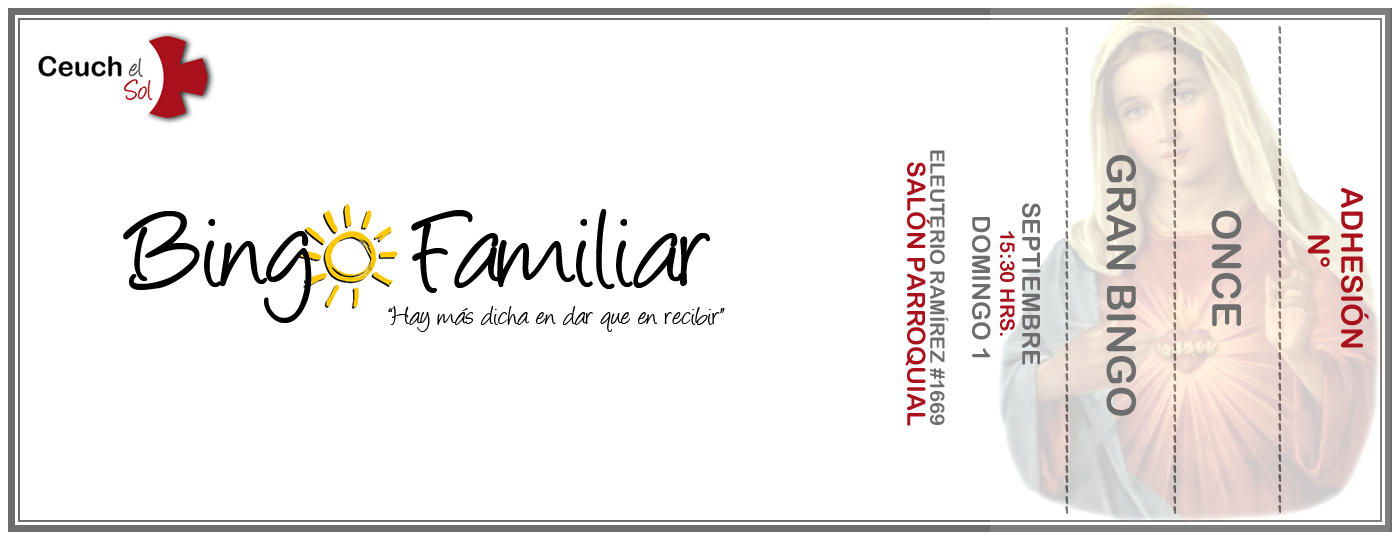
<style>
.page{position:relative;width:1400px;height:540px;background:#ffffff}
.page>*{position:absolute;margin:0}
.t1{font:30px "BuxtonSketch";color:#6d6d6d}
.t2{font:30px "BuxtonSketch";color:#857468}
.t3{font:20px "ArialRoundedMTBold";color:#6d6d6d}
.t4{font:40px "ArialRoundedMTBold";color:#6d6d6d}
.t5{font:25px "ArialRoundedMTBold";color:#a9111c}
.t6{font:30px "ArialRoundedMTBold";color:#a9111c}
.t7{font:130px "Angelina";color:#000000}
.t8{font:25px "ArialRoundedMTBold";color:#6d6d6d}
.t9{font:20px "ArialRoundedMTBold";color:#a9111c}
.t10{font:30px "Angelina";color:#000000}
</style>
<div class="page">
<p class="t1" style="left:1065px;top:27px;width:4px;height:487px;rotate:90deg">------------------------------------------------</p>
<p class="t2" style="left:1173px;top:27px;width:4px;height:487px;rotate:90deg">------------------------------------------------</p>
<p class="t1" style="left:1278px;top:26px;width:4px;height:487px;rotate:90deg">------------------------------------------------</p>
<p class="t3" style="left:930px;top:150px;width:19px;height:275px;rotate:90deg">ELEUTERIO RAMÍREZ #1669</p>
<p class="t4" style="left:1106px;top:155px;width:30px;height:261px;rotate:90deg">GRAN BINGO</p>
<p class="t5" style="left:905px;top:162px;width:25px;height:264px;rotate:90deg">SALÓN PARROQUIAL</p>
<p class="t6" style="left:1341px;top:188px;width:28px;height:160px;rotate:90deg">ADHESIÓN</p>
<p class="t7" style="left:123px;top:209px;width:587px;height:114px">Bing   Familiar</p>
<p class="t8" style="left:1022px;top:203px;width:19px;height:162px;rotate:90deg">SEPTIEMBRE</p>
<p class="t8" style="left:972px;top:217px;width:19px;height:141px;rotate:90deg">DOMINGO 1</p>
<p class="t4" style="left:1211px;top:210px;width:31px;height:117px;rotate:90deg">ONCE</p>
<p class="t9" style="left:1000px;top:231px;width:15px;height:105px;rotate:90deg">15:30 HRS.</p>
<p class="t6" style="left:1307px;top:235px;width:23px;height:32px;rotate:90deg">N°</p>
<p class="t10" style="left:388px;top:306px;width:337px;height:26px">“Hay más dicha en dar que en recibir”</p>
</div>
